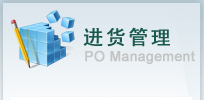
<style>
.page{position:relative;width:204px;height:100px}
.page>*{position:absolute;margin:0}
.t1{font:20px "SimHei";letter-spacing:0.1em;color:#19584d;font-weight:bold}
.t2{font:14px "ArialMT";color:#c3c5c5;font-weight:bold}
</style>
<div class="page">
<p class="t1" style="left:83px;top:27px;width:87px;height:20px">进货管理</p>
<p class="t2" style="left:85px;top:50px;width:110px;height:14px">PO Management</p>
</div>
